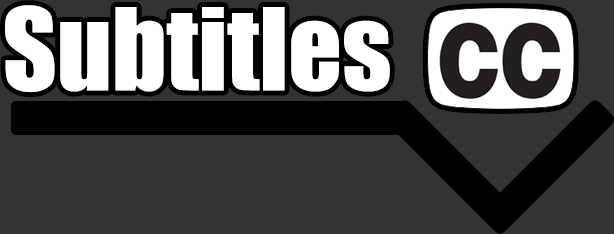
<style>
.page{position:relative;width:614px;height:234px;background:#333333}
.page>*{position:absolute;margin:0}
.t1{font:105.2px "Impact";color:#ffffff}
</style>
<div class="page">
<p class="t1" style="left:5px;top:5px;width:385px;height:88px">Subtitles</p>
</div>
